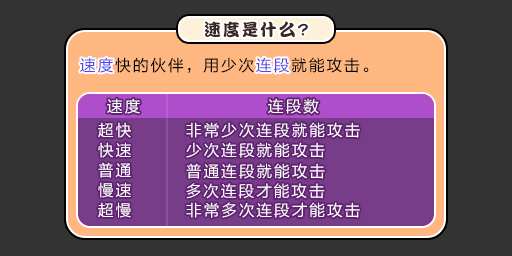
<style>
.page{position:relative;width:512px;height:256px;background:#333333}
.page>*{position:absolute;margin:0}
.t1{font:17px "DFPKanTingLiuW9";letter-spacing:0.1em;color:#3b2626}
.t2{font:16px "FZLTHJW--GB1-0";letter-spacing:0.1em;color:#000000}
.t3{font:16px "FZLTHJW--GB1-0";letter-spacing:0.1em;color:#5444ed}
.t4{font:16px "FZLTHJW--GB1-0";letter-spacing:0.1em;color:#ffffff}
</style>
<div class="page">
<p class="t1" style="left:204px;top:21px;width:104px;height:17px">速度是什么?</p>
<p class="t2" style="left:80px;top:57px;width:289px;height:16px"><span class="t3">速度</span>快的伙伴，用少次<span class="t3">连段</span>就能攻击。</p>
<p class="t3" style="left:80px;top:57px;width:33px;height:16px">速度</p>
<p class="t3" style="left:256px;top:57px;width:33px;height:16px">连段</p>
<p class="t4" style="left:107px;top:98px;width:33px;height:16px">速度</p>
<p class="t4" style="left:268px;top:98px;width:51px;height:16px">连段数</p>
<p class="t4" style="left:98px;top:122px;width:33px;height:16px">超快</p>
<p class="t4" style="left:186px;top:122px;width:174px;height:16px">非常少次连段就能攻击</p>
<p class="t4" style="left:98px;top:142px;width:33px;height:16px">快速</p>
<p class="t4" style="left:186px;top:142px;width:139px;height:16px">少次连段就能攻击</p>
<p class="t4" style="left:98px;top:162px;width:33px;height:16px">普通</p>
<p class="t4" style="left:186px;top:163px;width:139px;height:16px">普通连段就能攻击</p>
<p class="t4" style="left:98px;top:182px;width:33px;height:16px">慢速</p>
<p class="t4" style="left:186px;top:183px;width:139px;height:16px">多次连段才能攻击</p>
<p class="t4" style="left:98px;top:202px;width:33px;height:16px">超慢</p>
<p class="t4" style="left:186px;top:202px;width:174px;height:16px">非常多次连段才能攻击</p>
</div>
